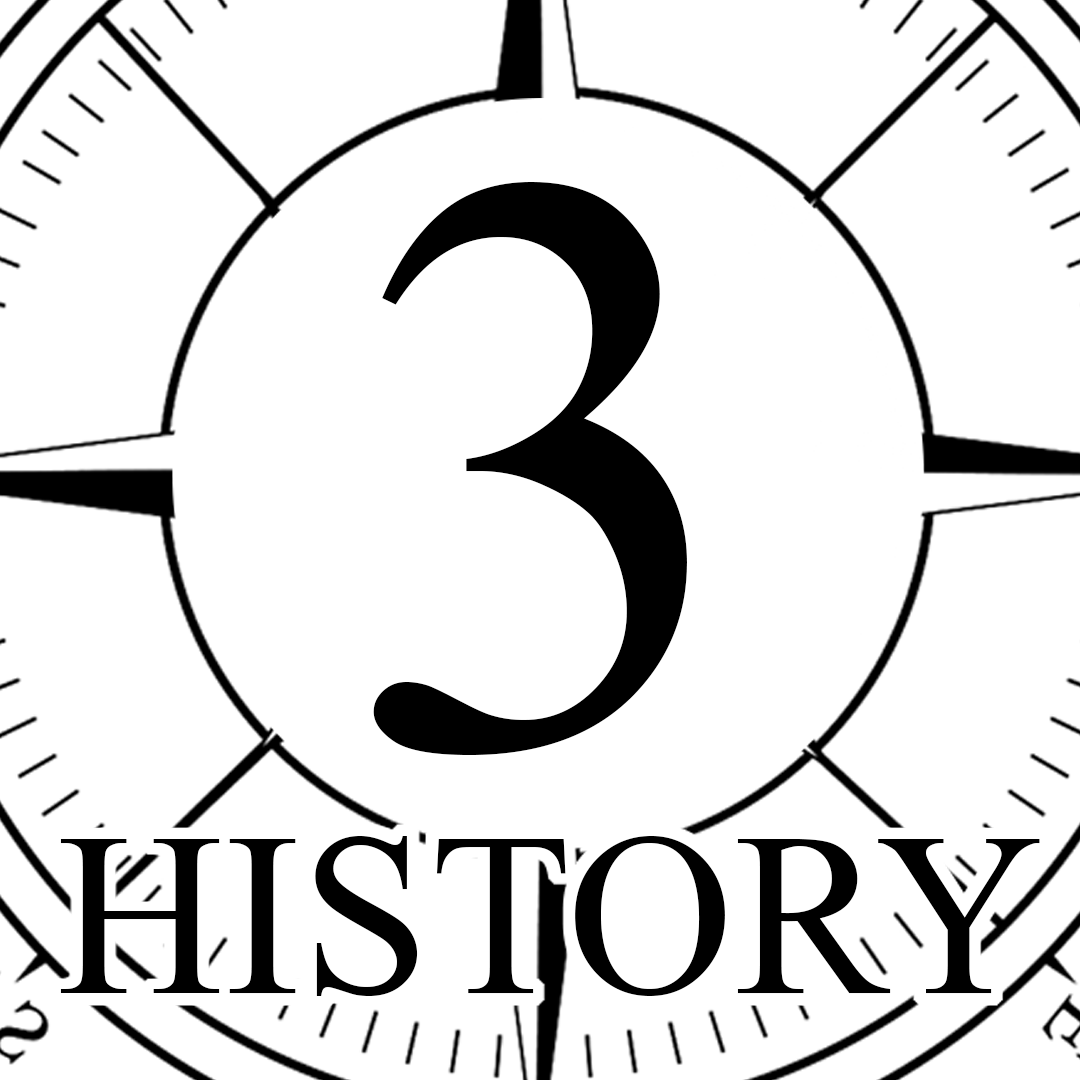
<style>
.page{position:relative;width:1080px;height:1080px;background:#ffffff}
.page>*{position:absolute;margin:0}
.t1{font:833.2px "TimesNewRomanPSMT";color:#000000}
.t2{font:231.5px "TimesNewRomanPSMT";color:#000000}
</style>
<div class="page">
<p class="t1" style="left:373px;top:182px;width:314px;height:573px">3</p>
<p class="t2" style="left:60px;top:836px;width:980px;height:160px">HISTORY</p>
</div>
